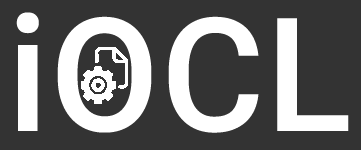
<style>
.page{position:relative;width:361px;height:150px;background:#333333}
.page>*{position:absolute;margin:0}
.t1{font:158.3px "Roboto-Medium";letter-spacing:0.01em;color:#ffffff}
.t2{font:162.5px "Roboto-Medium";letter-spacing:0.01em;color:#ffffff}
</style>
<div class="page">
<p class="t1" style="left:16px;top:12px;width:333px;height:121px"><span class="t2">i</span>OCL</p>
</div>
